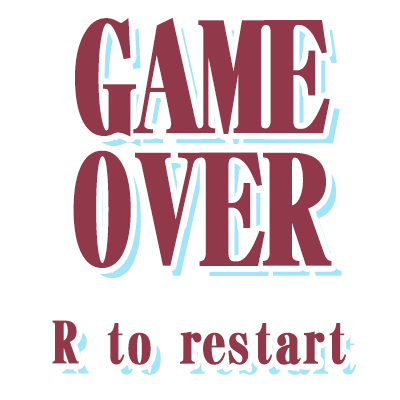
<style>
.page{position:relative;width:400px;height:400px;background:#ffffff}
.page>*{position:absolute;margin:0}
.t1{font:156.6px/44.2px "DFMincho-SU-WIN-RKSJ-H";letter-spacing:-0.04em;color:#91384a;scale:0.9 1}
.t2{font:59.5px "DFMincho-SU-WIN-RKSJ-H";letter-spacing:-0.04em;color:#91384a;scale:0.9 1}
</style>
<div class="page">
<p class="t1" style="left:73px;top:18px;width:259px;height:250px;text-align:right">GAME<br><br><br> OVER</p>
<p class="t2" style="left:52px;top:320px;width:294px;height:45px">R to restart</p>
</div>
